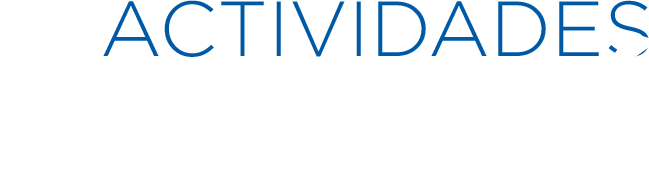
<style>
.page{position:relative;width:649px;height:175px;background:#ffffff}
.page>*{position:absolute;margin:0}
.t1{font:77.8px "Gotham-Light";color:#0059a7}
</style>
<div class="page">
<p class="t1" style="left:103px;top:0px;width:546px;height:57px">ACTIVIDADES</p>
</div>
